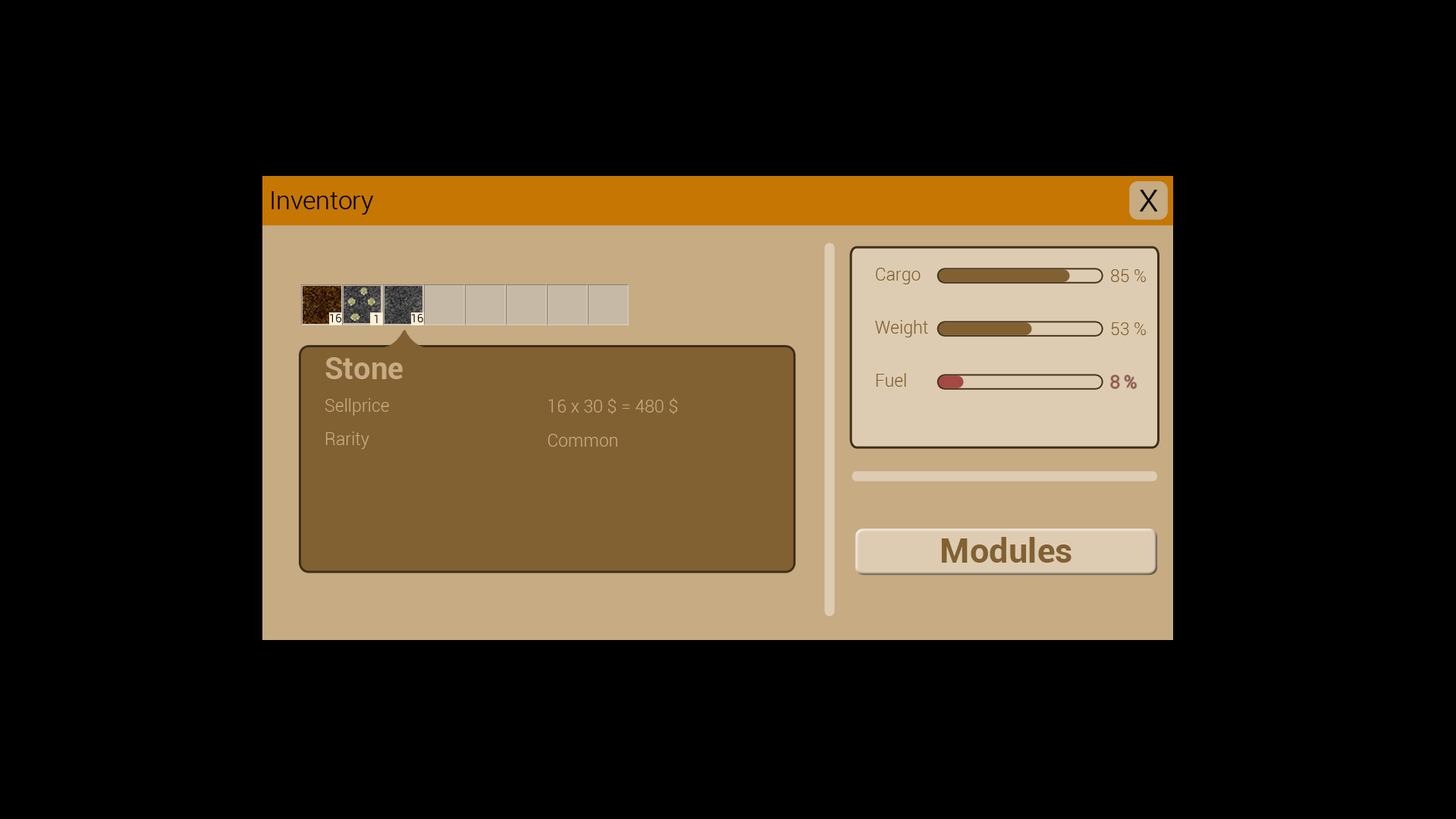
<style>
.page{position:relative;width:1456px;height:819px;background:#000000}
.page>*{position:absolute;margin:0}
.t1{font:25.5px "Roboto-Light";color:#000000}
.t2{font:17.4px "Roboto-Light";color:#816132}
.t3{font:11.3px "Roboto-Light";color:#000000}
.t4{font:11.3px "Roboto-Light"}
.t5{font:30.3px "Roboto-Bold";color:#c6ab83}
.t6{font:17.4px "Roboto-Light";color:#a54943}
.t7{font:17.4px "Roboto-Light";color:#c6ab83}
.t8{font:34.4px "Roboto-Bold";color:#816132}
</style>
<div class="page">
<p class="t1" style="left:271px;top:191px;width:102px;height:24px">Inventory</p>
<p class="t2" style="left:876px;top:268px;width:45px;height:16px">Cargo</p>
<p class="t2" style="left:1111px;top:269px;width:35px;height:13px">85 %</p>
<p class="t3" style="left:330px;top:314px;width:11px;height:8px">16</p>
<p class="t4" style="left:374px;top:315px;width:4px;height:8px">1</p>
<p class="t3" style="left:412px;top:314px;width:11px;height:8px">16</p>
<p class="t2" style="left:875px;top:320px;width:53px;height:17px">Weight</p>
<p class="t2" style="left:1111px;top:322px;width:35px;height:13px">53 %</p>
<p class="t5" style="left:325px;top:357px;width:78px;height:22px">Stone</p>
<p class="t2" style="left:876px;top:373px;width:30px;height:14px">Fuel</p>
<p class="t6" style="left:1111px;top:375px;width:26px;height:13px">8 %</p>
<p class="t7" style="left:325px;top:398px;width:64px;height:18px">Sellprice</p>
<p class="t7" style="left:548px;top:398px;width:130px;height:16px">16 x 30 $ = 480 $</p>
<p class="t7" style="left:325px;top:431px;width:44px;height:18px">Rarity</p>
<p class="t7" style="left:548px;top:434px;width:69px;height:13px">Common</p>
<p class="t8" style="left:941px;top:537px;width:131px;height:26px">Modules</p>
</div>
